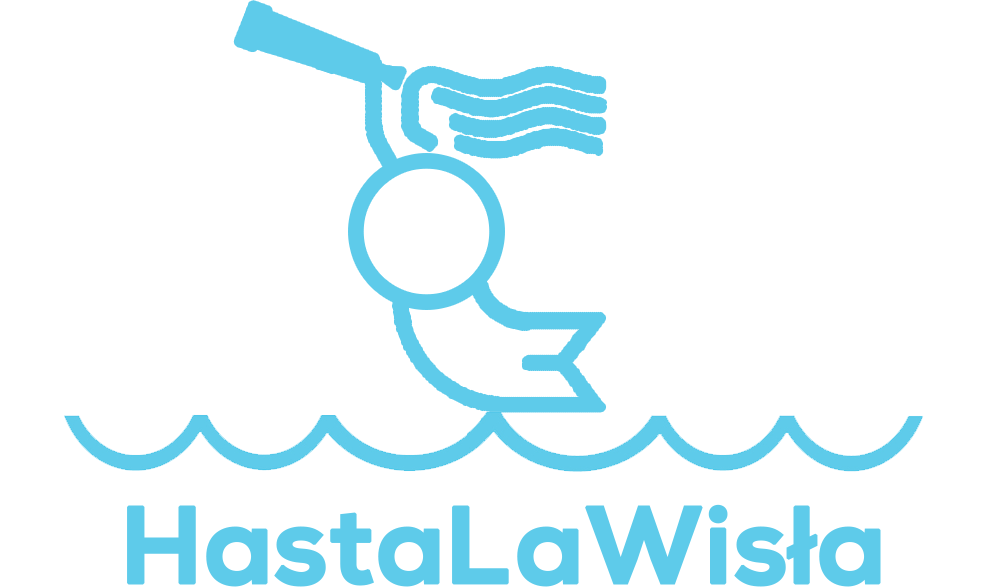
<style>
.page{position:relative;width:1000px;height:587px;background:#ffffff}
.page>*{position:absolute;margin:0}
.t1{font:109px "NexaBold";color:#5ecbea;font-weight:bold}
</style>
<div class="page">
<p class="t1" style="left:127px;top:504px;width:754px;height:83px">HastaLaWisła</p>
</div>
